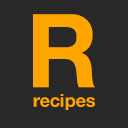
<style>
.page{position:relative;width:128px;height:128px;background:#282828}
.page>*{position:absolute;margin:0}
.t1{font:101.6px "HelveticaNeue-Bold";color:#ffa500}
.t2{font:18.1px "HelveticaNeue-Bold";color:#ffa500}
</style>
<div class="page">
<p class="t1" style="left:33px;top:14px;width:62px;height:74px">R</p>
<p class="t2" style="left:33px;top:94px;width:62px;height:16px">recipes</p>
</div>
